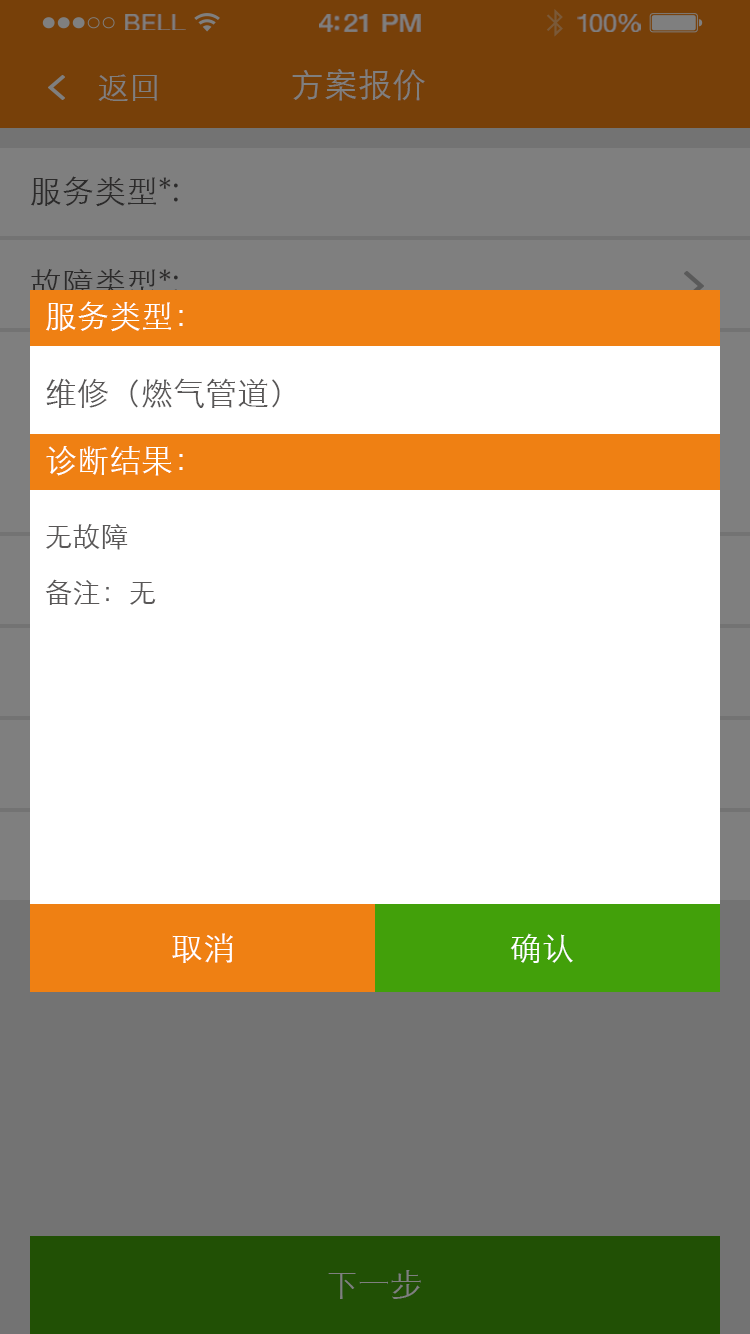
<style>
.page{position:relative;width:750px;height:1334px;background:#ffffff}
.page>*{position:absolute;margin:0}
.t1{font:23.3px "HelveticaNeue";letter-spacing:0.02em;color:#7f7f7f;scale:1.06 1}
.t2{font:25.3px "HelveticaNeue-Medium";letter-spacing:-0.02em;color:#7f7f7f;scale:1.06 1}
.t3{font:24.3px "HelveticaNeue";letter-spacing:-0.02em;color:#7f7f7f;scale:1.06 1}
.t4{font:32px "STXihei";color:#7f7f7f}
.t5{font:34px "STXihei";color:#7f7f7f}
.t6{font:32px "STXihei";color:#2c2b2b}
.t7{font:32px "STXihei";color:#ffffff}
.t8{font:32px "STXihei";color:#595757}
.t9{font:28px/56px "STXihei";color:#595757}
</style>
<div class="page">
<p class="t1" style="left:125px;top:14px;width:61px;height:16px">BELL</p>
<p class="t2" style="left:319px;top:14px;width:102px;height:18px">4:21 PM</p>
<p class="t3" style="left:577px;top:14px;width:64px;height:18px">100%</p>
<p class="t4" style="left:98px;top:74px;width:59px;height:27px">返回</p>
<p class="t5" style="left:292px;top:69px;width:133px;height:32px">方案报价</p>
<p class="t6" style="left:31px;top:176px;width:147px;height:31px">服务类型*:</p>
<p class="t6" style="left:31px;top:269px;width:147px;height:30px">故障类型*:</p>
<p class="t7" style="left:46px;top:301px;width:137px;height:31px">服务类型：</p>
<p class="t8" style="left:46px;top:378px;width:234px;height:30px">维修（燃气管道）</p>
<p class="t7" style="left:46px;top:446px;width:137px;height:30px">诊断结果：</p>
<p class="t9" style="left:45px;top:524px;width:111px;height:81px">无故障<br>备注：无</p>
<p class="t7" style="left:172px;top:933px;width:61px;height:30px">取消</p>
<p class="t7" style="left:510px;top:933px;width:63px;height:30px">确认</p>
<p class="t4" style="left:328px;top:1270px;width:93px;height:29px">下一步</p>
</div>
